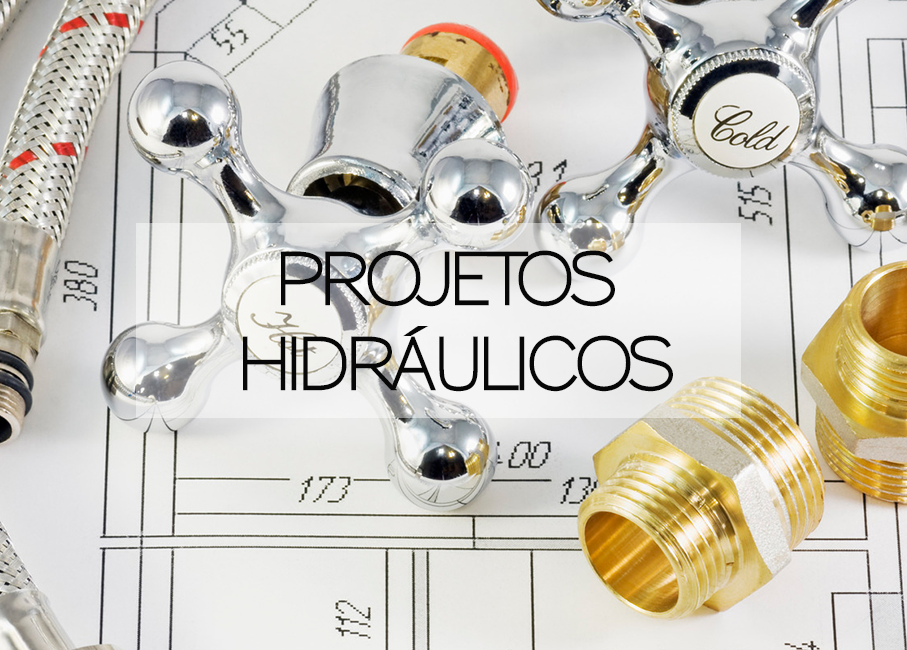
<style>
.page{position:relative;width:907px;height:650px}
.page>*{position:absolute;margin:0}
.t1{font:70.9px "Sansumi-Bold";letter-spacing:-0.05em;color:#070707;scale:0.9 1}
</style>
<div class="page">
<p class="t1" style="left:243px;top:250px;width:430px;height:142px;text-align:center">PROJETOS<br>HIDRÁULICOS</p>
</div>
